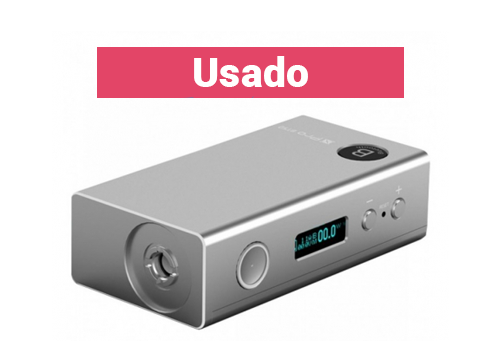
<style>
.page{position:relative;width:501px;height:341px;background:#ffffff}
.page>*{position:absolute;margin:0}
.t1{font:41.4px "Roboto-Black";color:#fffffe}
</style>
<div class="page">
<p class="t1" style="left:194px;top:56px;width:114px;height:31px">Usado</p>
</div>
